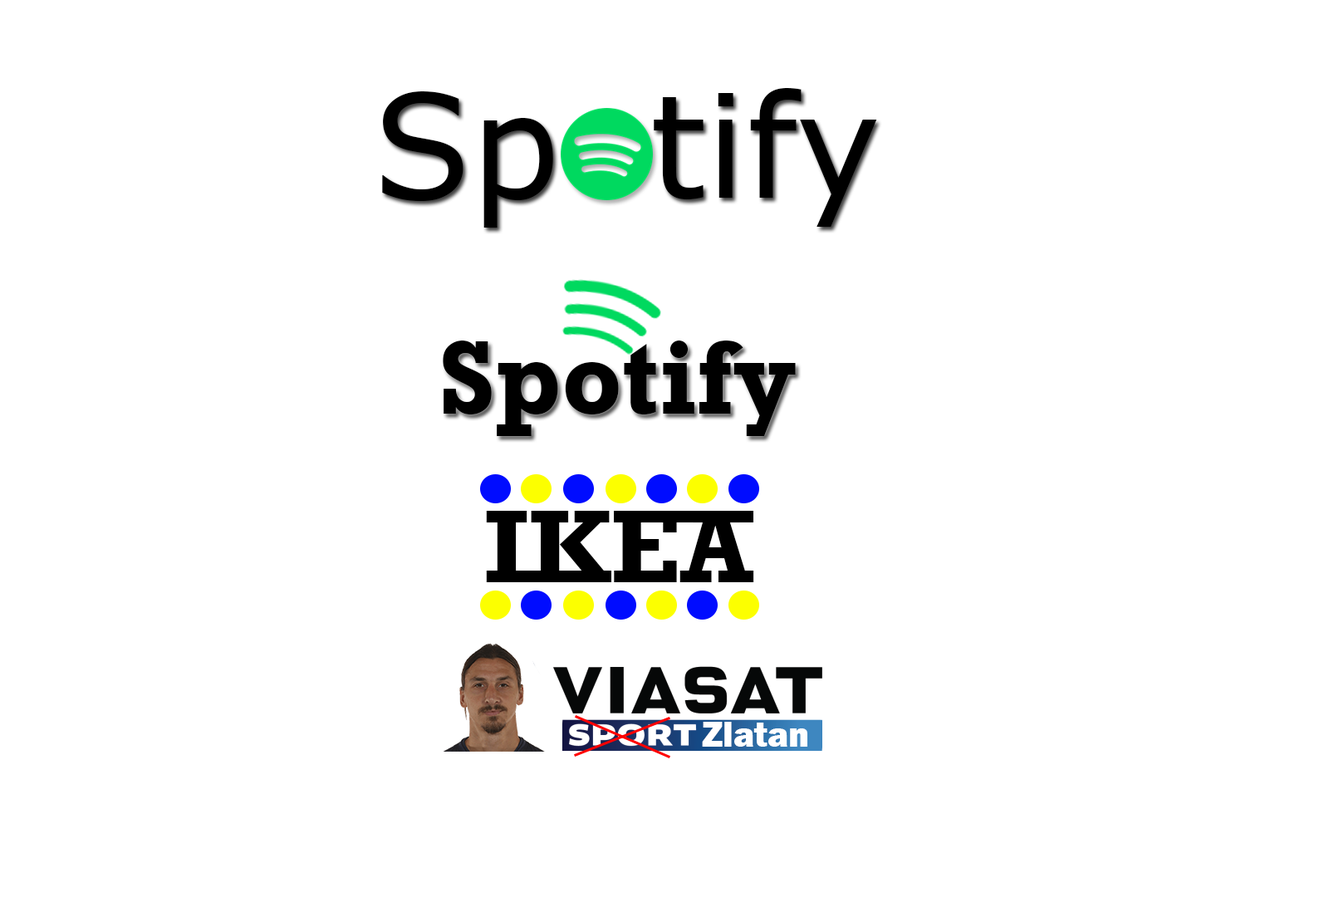
<style>
.page{position:relative;width:1329px;height:897px;background:#ffffff}
.page>*{position:absolute;margin:0}
.t1{font:143.7px "Verdana";color:#000000}
.t2{font:106.1px "Rockwell-Bold";color:#000000}
.t3{font:104.7px "Rockwell-Bold";color:#000000}
.t4{font:36.9px "FranklinGothic-Heavy";color:#ffffff;scale:0.96 1}
</style>
<div class="page">
<p class="t1" style="left:654px;top:87px;width:223px;height:140px">tify</p>
<p class="t1" style="left:382px;top:91px;width:171px;height:137px">Sp</p>
<p class="t2" style="left:443px;top:341px;width:353px;height:95px">Spotify</p>
<p class="t3" style="left:486px;top:511px;width:268px;height:71px">IKEA</p>
<p class="t4" style="left:702px;top:722px;width:105px;height:25px">Zlatan</p>
</div>
